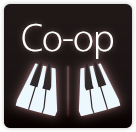
<style>
.page{position:relative;width:136px;height:132px}
.page>*{position:absolute;margin:0}
.t1{font:35.3px "KozGoPr6N-Light";letter-spacing:-0.025em;color:#ffffff}
</style>
<div class="page">
<p class="t1" style="left:22px;top:23px;width:91px;height:36px">Co-op</p>
</div>
